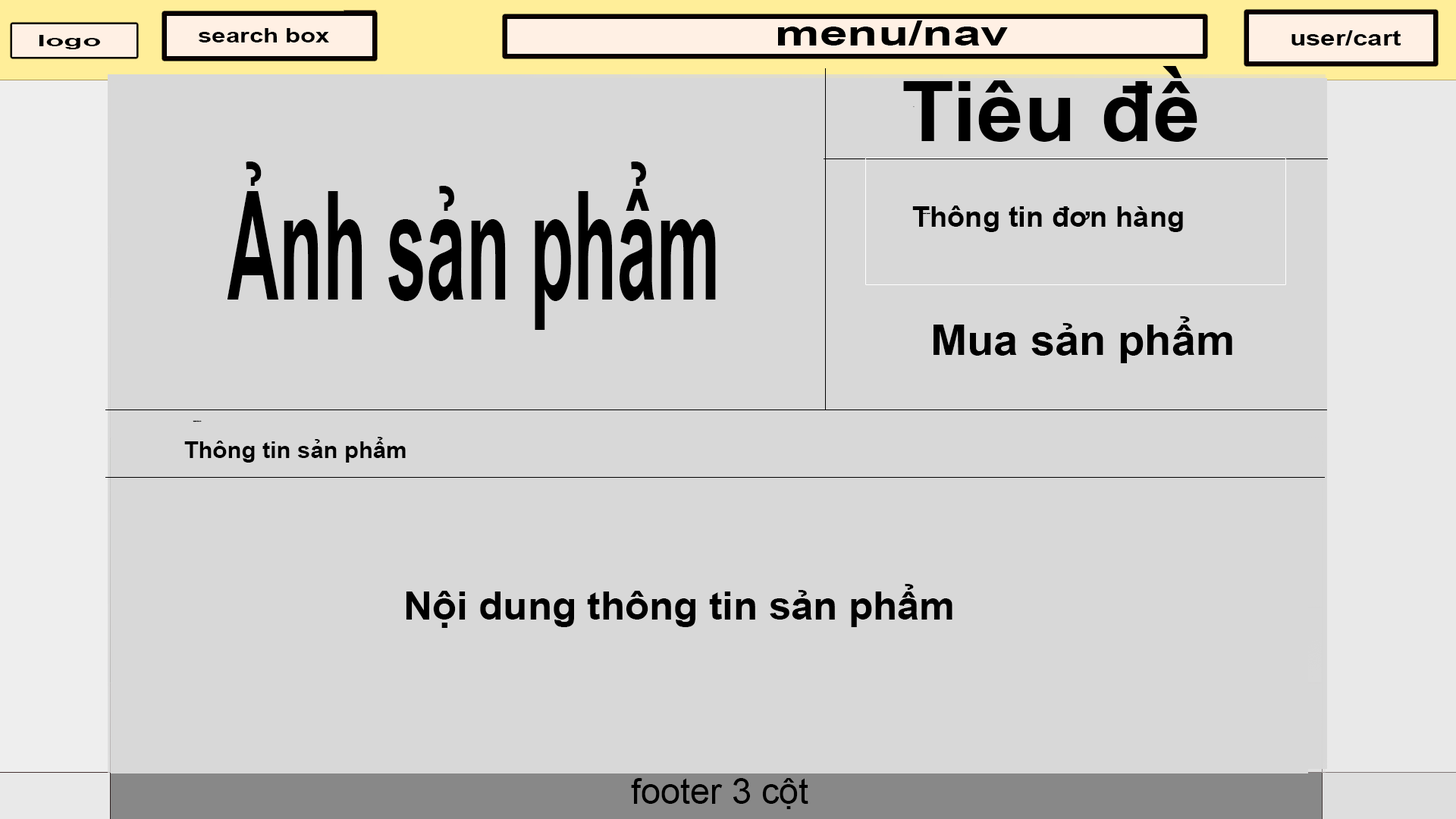
<style>
.page{position:relative;width:1456px;height:819px;background:#d8d8d8}
.page>*{position:absolute;margin:0}
.t1{font:19.7px "Arial-BoldMT";color:#000000;scale:1.27 1}
.t2{font:35px "Arial-BoldMT";color:#000000;scale:1.43 1}
.t3{font:15.1px "Arial-BoldMT";color:#000000;scale:2.02 1}
.t4{font:21.2px "Arial-BoldMT";color:#000000;scale:1.25 1}
.t5{font:83.3px "Arial-BoldMT";color:#000000;scale:1.03 1}
.t6{font:1.2px "Arial-BoldMT";scale:1.03 1}
.t7{font:151.9px "Arial-BoldMT";color:#000000;scale:0.47 1}
.t8{font:28px "Arial-BoldMT";color:#000000;scale:1.03 1}
.t9{font:1.2px "Arial-BoldMT";color:#000000;scale:1.03 1}
.t10{font:42.5px "Arial-BoldMT";color:#000000;scale:1.03 1}
.t11{font:22.7px "Arial-BoldMT";color:#000000;scale:1.03 1}
.t12{font:38.6px "Arial-BoldMT";color:#000000;scale:1.03 1}
.t13{font:35.6px "ArialMT";color:#000000}
</style>
<div class="page">
<p class="t1" style="left:198px;top:28px;width:131px;height:14px">search box</p>
<p class="t2" style="left:778px;top:20px;width:230px;height:25px">menu/nav</p>
<p class="t3" style="left:39px;top:35px;width:61px;height:14px">logo</p>
<p class="t4" style="left:1291px;top:30px;width:110px;height:15px">user/cart</p>
<p class="t5" style="left:903px;top:66px;width:294px;height:76px">Tiêu đề</p>
<p class="t6" style="left:913px;top:106px;width:2px;height:2px">```</p>
<p class="t7" style="left:227px;top:162px;width:489px;height:168px">Ảnh sản phẩm</p>
<p class="t8" style="left:912px;top:206px;width:271px;height:26px">Thông tin đơn hàng</p>
<p class="t9" style="left:922px;top:212px;width:8px;height:3px">Lorem Ipsum</p>
<p class="t10" style="left:933px;top:316px;width:299px;height:47px">Mua sản phẩm</p>
<p class="t9" style="left:193px;top:420px;width:9px;height:2px">Lorem Ipsum</p>
<p class="t11" style="left:184px;top:437px;width:222px;height:26px">Thông tin sản phẩm</p>
<p class="t12" style="left:406px;top:584px;width:546px;height:44px">Nội dung thông tin sản phẩm</p>
<p class="t13" style="left:631px;top:778px;width:177px;height:31px">footer 3 cột</p>
</div>
